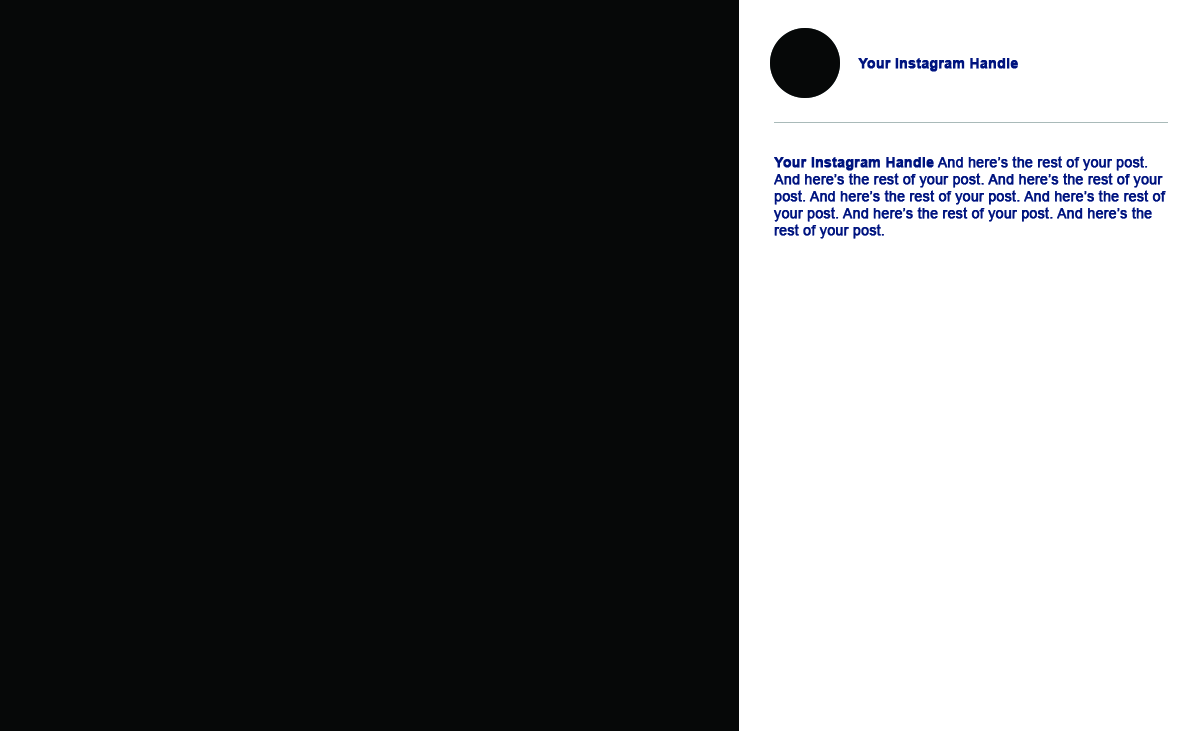
<style>
.page{position:relative;width:1200px;height:731px;background:#060808}
.page>*{position:absolute;margin:0}
.t1{font:14px "Arial-BoldMT";color:#00147f;font-weight:bold}
.t2{font:14px "ArialMT";color:#00147f;font-weight:bold}
</style>
<div class="page">
<p class="t1" style="left:858px;top:58px;width:160px;height:14px">Your Instagram Handle</p>
<p class="t2" style="left:773px;top:156px;width:393px;height:83px"><span class="t1">Your Instagram Handle</span> And here’s the rest of your post. And here’s the rest of your post. And here’s the rest of your post. And here’s the rest of your post. And here’s the rest of your post. And here’s the rest of your post. And here’s the rest of your post.</p>
</div>
